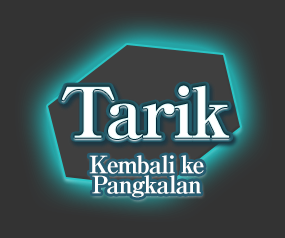
<style>
.page{position:relative;width:285px;height:238px;background:#333333}
.page>*{position:absolute;margin:0}
.t1{font:24px/20px "RyuminPro-ExBold";letter-spacing:-0.06em;color:#ffffff}
</style>
<div class="page">
<p class="t1" style="left:89px;top:155px;width:115px;height:43px;text-align:center">Kembali ke<br>Pangkalan</p>
</div>
